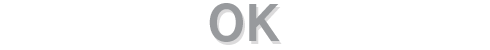
<style>
.page{position:relative;width:490px;height:50px;background:#ffffff}
.page>*{position:absolute;margin:0}
.t1{font:48px "RodinPro-B";color:#989a9d}
</style>
<div class="page">
<p class="t1" style="left:209px;top:3px;width:71px;height:39px">OK</p>
</div>
